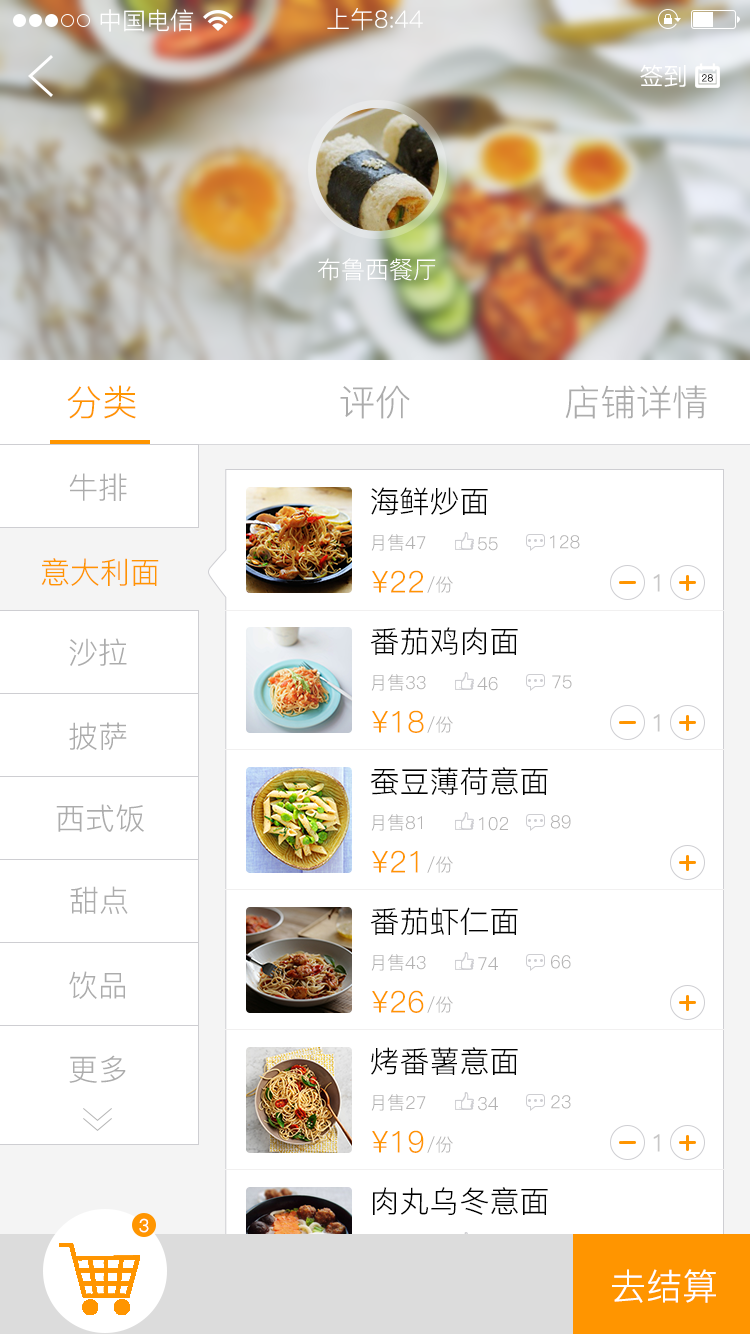
<style>
.page{position:relative;width:750px;height:1334px;background:#ffffff}
.page>*{position:absolute;margin:0}
.t1{font:24px "PingFang-SC-Regular";color:#ffffff}
.t2{font:36px "PingFang-SC-Regular";color:#ff9500}
.t3{font:36px "PingFang-SC-Regular";color:#acacac}
.t4{font:30px "PingFang-SC-Regular";color:#acacac}
.t5{font:30px "PingFang-SC-Regular";color:#000000}
.t6{font:18px "PingFang-SC-Regular";color:#b3b2b2}
.t7{font:30px "PingFang-SC-Regular";color:#ff9500}
.t8{font:24px "PingFang-SC-Regular";color:#c8c7c7}
.t9{font:18px "PingFang-SC-Regular";color:#ffffff}
.t10{font:36px "PingFang-SC-Regular";color:#ffffff}
</style>
<div class="page">
<p class="t1" style="left:100px;top:9px;width:94px;height:23px">中国电信</p>
<p class="t1" style="left:327px;top:8px;width:96px;height:23px">上午8:44</p>
<p class="t1" style="left:640px;top:64px;width:46px;height:23px">签到</p>
<p class="t1" style="left:318px;top:258px;width:118px;height:23px">布鲁西餐厅</p>
<p class="t2" style="left:67px;top:385px;width:69px;height:34px">分类</p>
<p class="t3" style="left:340px;top:385px;width:70px;height:34px">评价</p>
<p class="t3" style="left:565px;top:385px;width:142px;height:34px">店铺详情</p>
<p class="t4" style="left:69px;top:473px;width:58px;height:28px">牛排</p>
<p class="t5" style="left:371px;top:487px;width:117px;height:29px">海鲜炒面</p>
<p class="t6" style="left:371px;top:534px;width:55px;height:17px">月售47</p>
<p class="t6" style="left:478px;top:537px;width:20px;height:14px">55</p>
<p class="t6" style="left:550px;top:535px;width:30px;height:14px">128</p>
<p class="t7" style="left:41px;top:558px;width:118px;height:28px">意大利面</p>
<p class="t7" style="left:372px;top:570px;width:51px;height:23px">¥22</p>
<p class="t6" style="left:427px;top:576px;width:26px;height:17px">/份</p>
<p class="t8" style="left:653px;top:574px;width:7px;height:18px">1</p>
<p class="t5" style="left:370px;top:627px;width:148px;height:28px">番茄鸡肉面</p>
<p class="t4" style="left:69px;top:638px;width:58px;height:28px">沙拉</p>
<p class="t6" style="left:371px;top:674px;width:55px;height:17px">月售33</p>
<p class="t6" style="left:477px;top:677px;width:21px;height:14px">46</p>
<p class="t6" style="left:552px;top:675px;width:20px;height:14px">75</p>
<p class="t7" style="left:372px;top:710px;width:52px;height:23px">¥18</p>
<p class="t4" style="left:69px;top:722px;width:58px;height:28px">披萨</p>
<p class="t6" style="left:427px;top:716px;width:26px;height:17px">/份</p>
<p class="t8" style="left:653px;top:714px;width:7px;height:18px">1</p>
<p class="t5" style="left:370px;top:767px;width:178px;height:28px">蚕豆薄荷意面</p>
<p class="t4" style="left:56px;top:804px;width:88px;height:28px">西式饭</p>
<p class="t6" style="left:371px;top:814px;width:51px;height:17px">月售81</p>
<p class="t6" style="left:479px;top:817px;width:29px;height:14px">102</p>
<p class="t6" style="left:550px;top:815px;width:21px;height:14px">89</p>
<p class="t7" style="left:372px;top:850px;width:46px;height:23px">¥21</p>
<p class="t6" style="left:427px;top:856px;width:26px;height:17px">/份</p>
<p class="t4" style="left:70px;top:886px;width:58px;height:28px">甜点</p>
<p class="t5" style="left:370px;top:907px;width:148px;height:28px">番茄虾仁面</p>
<p class="t6" style="left:371px;top:954px;width:55px;height:17px">月售43</p>
<p class="t6" style="left:478px;top:957px;width:20px;height:13px">74</p>
<p class="t6" style="left:551px;top:955px;width:20px;height:14px">66</p>
<p class="t4" style="left:69px;top:971px;width:56px;height:28px">饮品</p>
<p class="t7" style="left:372px;top:990px;width:52px;height:23px">¥26</p>
<p class="t6" style="left:427px;top:996px;width:26px;height:17px">/份</p>
<p class="t5" style="left:371px;top:1047px;width:147px;height:28px">烤番薯意面</p>
<p class="t4" style="left:69px;top:1055px;width:57px;height:28px">更多</p>
<p class="t6" style="left:371px;top:1094px;width:55px;height:17px">月售27</p>
<p class="t6" style="left:478px;top:1097px;width:20px;height:14px">34</p>
<p class="t6" style="left:551px;top:1095px;width:20px;height:14px">23</p>
<p class="t7" style="left:372px;top:1130px;width:52px;height:23px">¥19</p>
<p class="t8" style="left:653px;top:1134px;width:7px;height:18px">1</p>
<p class="t6" style="left:427px;top:1136px;width:26px;height:17px">/份</p>
<p class="t5" style="left:373px;top:1187px;width:175px;height:28px">肉丸乌冬意面</p>
<p class="t9" style="left:139px;top:1218px;width:10px;height:15px">3</p>
<p class="t10" style="left:612px;top:1269px;width:104px;height:34px">去结算</p>
</div>
